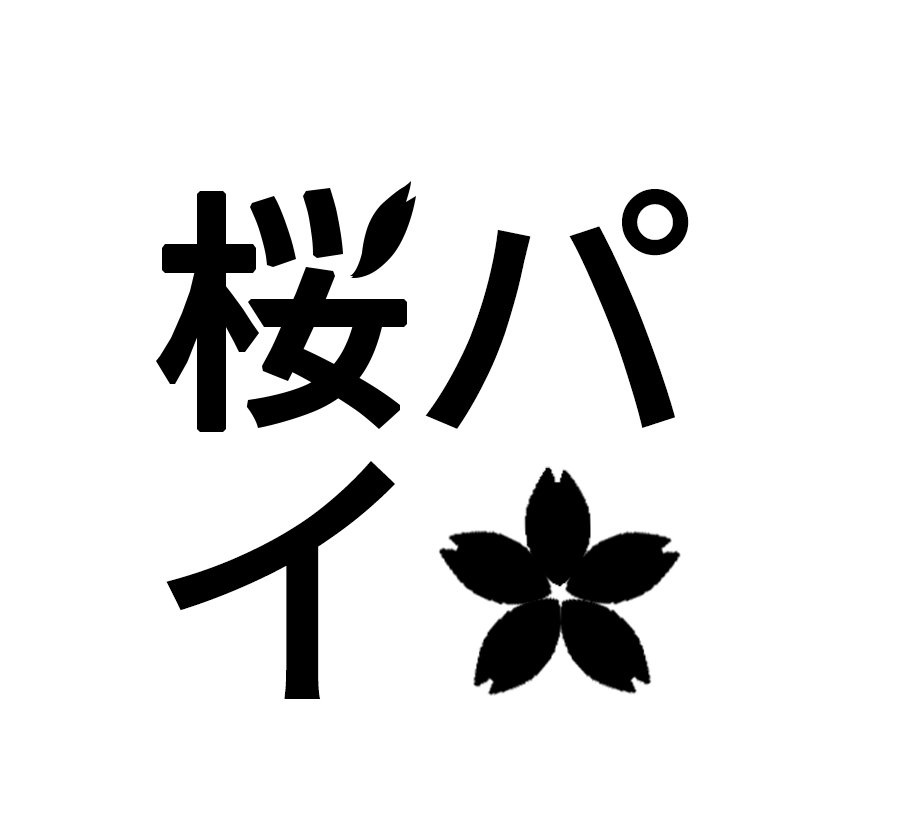
<style>
.page{position:relative;width:900px;height:831px;background:#ffffff}
.page>*{position:absolute;margin:0}
.t1{font:286px "NotoSansJP-Medium";letter-spacing:0.01em;color:#000000}
</style>
<div class="page">
<p class="t1" style="left:425px;top:189px;width:264px;height:240px">パ</p>
<p class="t1" style="left:166px;top:461px;width:229px;height:238px">イ</p>
</div>
